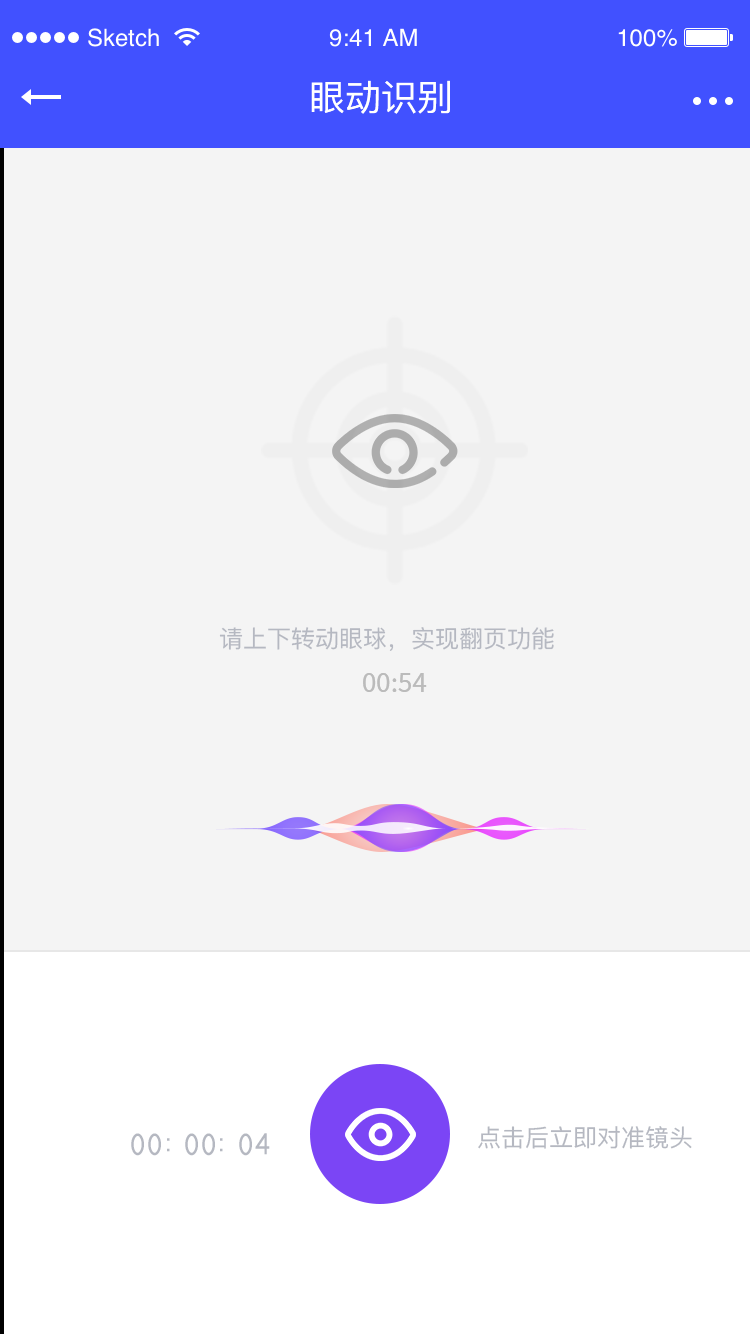
<style>
.page{position:relative;width:750px;height:1334px;background:#f4f4f4}
.page>*{position:absolute;margin:0}
.t1{font:36px "PingFang-SC-Medium";color:#ffffff}
.t2{font:24px "PingFang-SC-Medium";color:#b5b8c1}
.t3{font:26px "SourceHanSansCN-Regular";color:#bbbbbb}
.t4{font:32px "59--Regular";color:#b5b8c1}
</style>
<div class="page">
<p class="t1" style="left:311px;top:80px;width:139px;height:34px">眼动识别</p>
<p class="t2" style="left:219px;top:627px;width:335px;height:24px">请上下转动眼球，实现翻页功能</p>
<p class="t3" style="left:363px;top:673px;width:64px;height:19px">00:54</p>
<p class="t4" style="left:131px;top:1133px;width:139px;height:23px">00:00:04</p>
<p class="t2" style="left:478px;top:1126px;width:214px;height:23px">点击后立即对准镜头</p>
</div>
